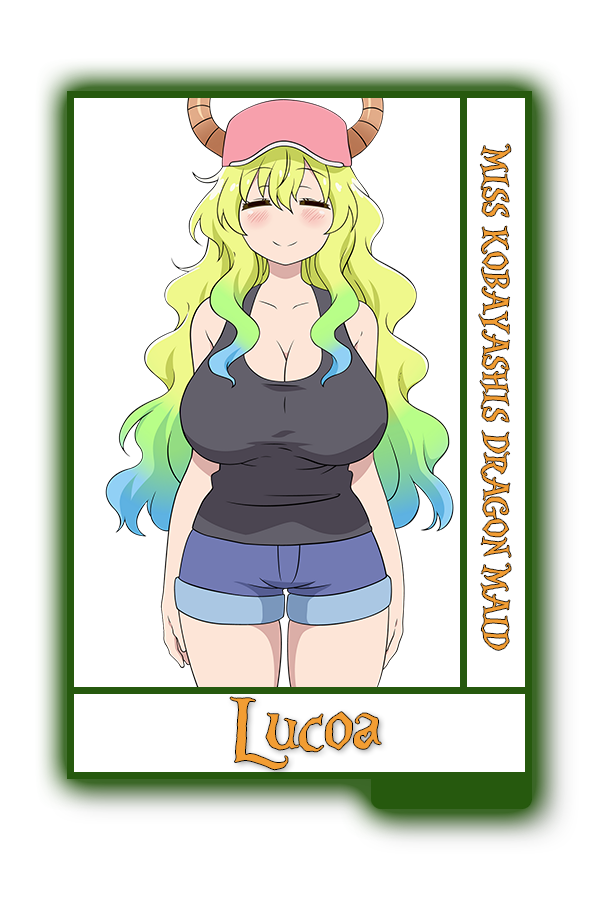
<style>
.page{position:relative;width:600px;height:900px;background:#ffffff}
.page>*{position:absolute;margin:0}
.t1{font:37.3px "AliceinWonderland";color:#f29d33}
.t2{font:92.7px "AliceinWonderland";color:#f29d33}
</style>
<div class="page">
<p class="t1" style="left:479px;top:144px;width:32px;height:506px;rotate:90deg">MISS KOBAYASHIS DRAGON MAID</p>
<p class="t2" style="left:230px;top:697px;width:151px;height:73px">Lucoa</p>
</div>
